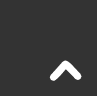
<style>
.page{position:relative;width:97px;height:96px;background:#333333}
.page>*{position:absolute;margin:0}
.t1{font:78.2px "ComicSansMS";color:#ffffff}
</style>
<div class="page">
<p class="t1" style="left:49px;top:60px;width:33px;height:21px">^</p>
</div>
